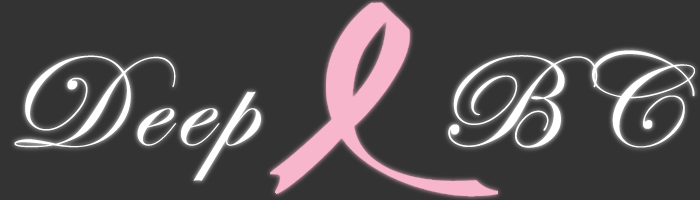
<style>
.page{position:relative;width:700px;height:200px;background:#333333}
.page>*{position:absolute;margin:0}
.t1{font:135px "EdwardianScriptITC";letter-spacing:0.075em;color:#ffffff}
</style>
<div class="page">
<p class="t1" style="left:14px;top:50px;width:681px;height:131px">Deep     BC</p>
</div>
